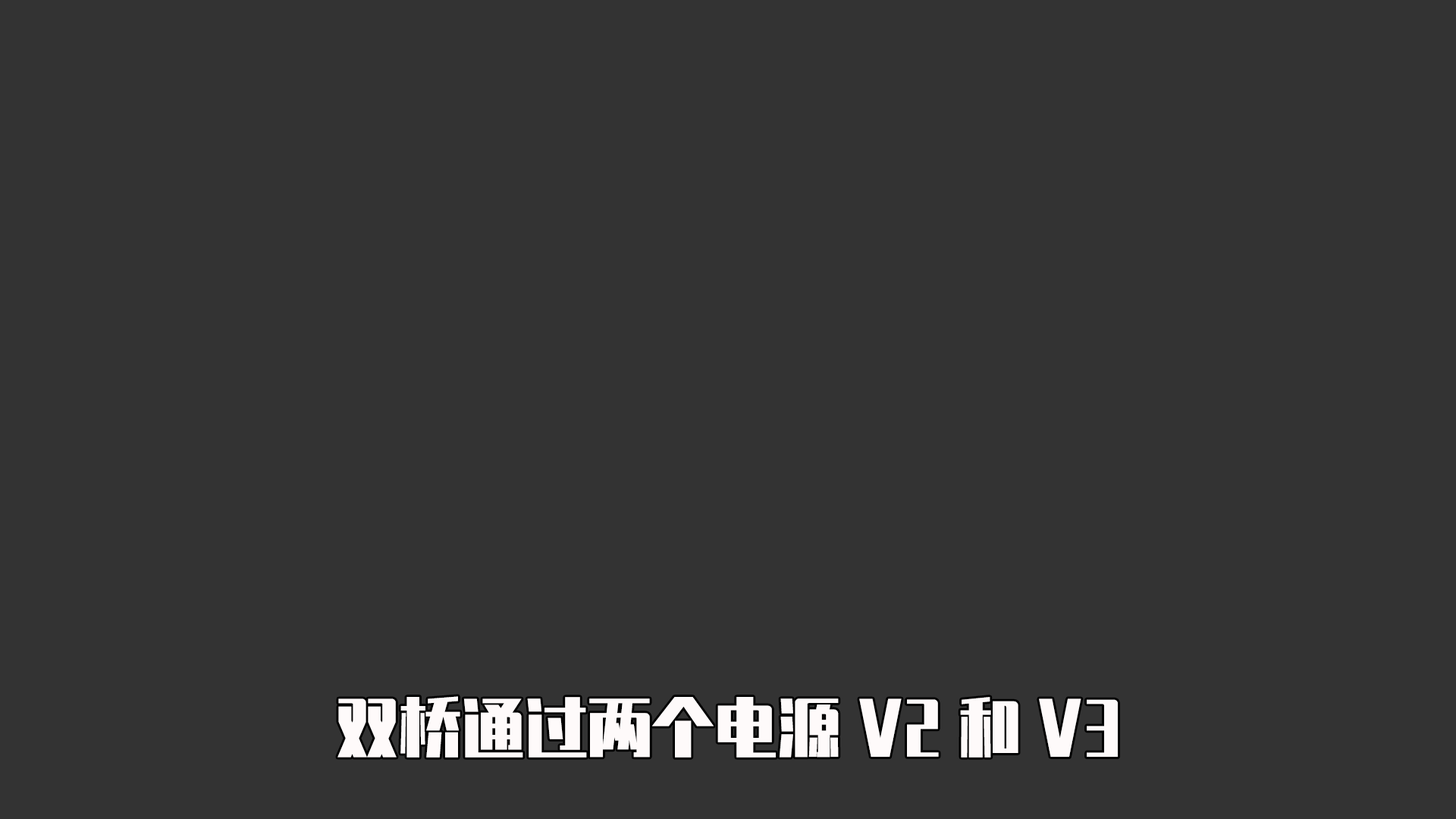
<style>
.page{position:relative;width:1456px;height:819px;background:#333333}
.page>*{position:absolute;margin:0}
.t1{font:63.2px "ZhenyanGB-Regular";color:#fefafa}
</style>
<div class="page">
<p class="t1" style="left:337px;top:696px;width:781px;height:62px">双桥通过两个电源V2和V3</p>
</div>
